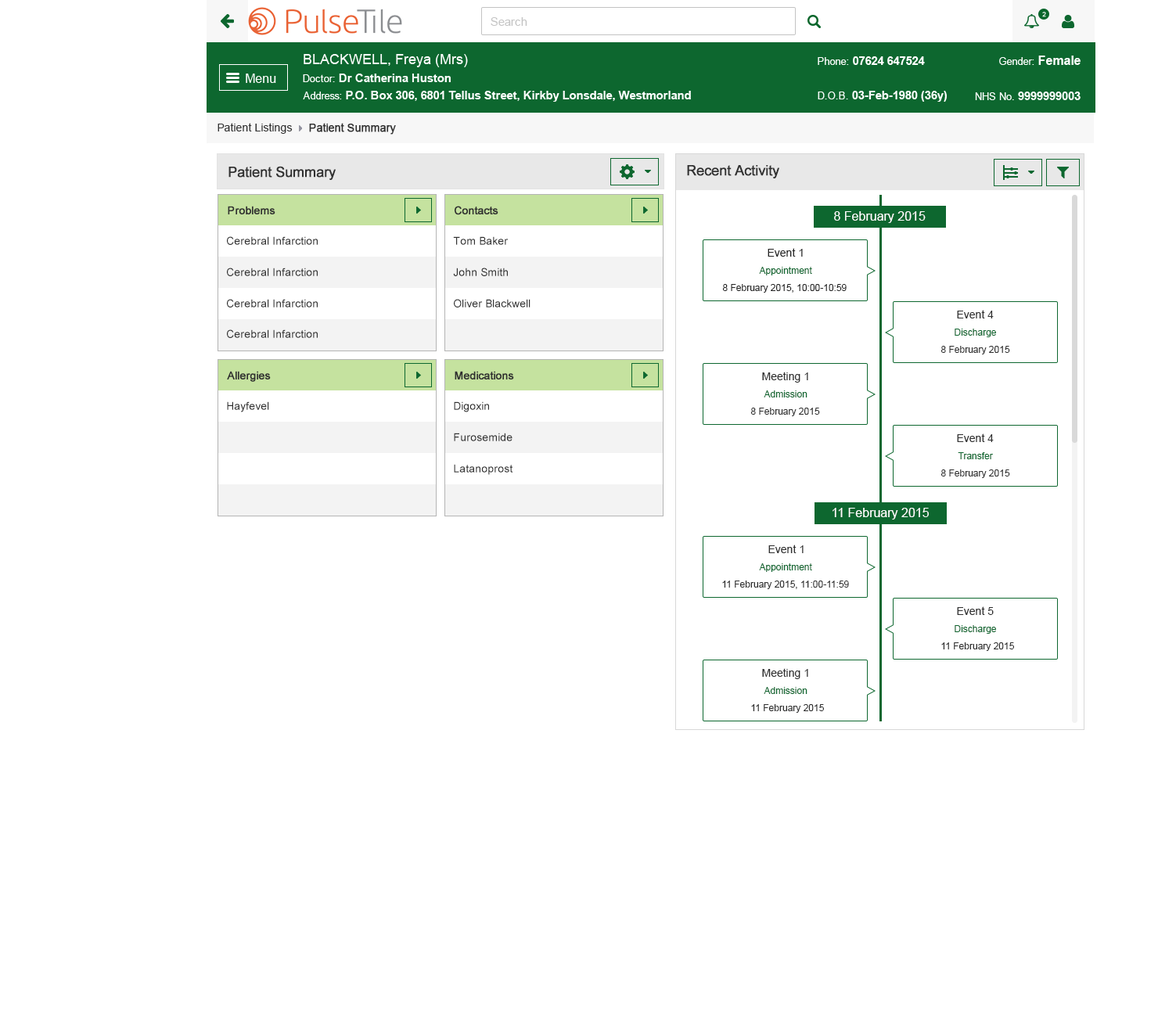
<style>
.page{position:relative;width:1176px;height:1014px;background:#ffffff}
.page>*{position:absolute;margin:0}
.t1{font:11px "ArialMT";color:#313131}
.t2{font:11px "ArialMT";color:#313131;font-weight:bold}
.t3{font:14.1px "ArialMT";color:#303030;font-weight:bold}
.t4{font:11px "ArialMT";color:#303030;font-weight:bold}
.t5{font:12.5px "ArialMT";color:#ffffff}
.t6{font:11px "ArialMT";color:#303030}
.t7{font:11px "ArialMT";color:#242424}
.t8{font:9.4px "ArialMT";color:#0d672f}
.t9{font:9.4px "ArialMT";color:#242424}
.t10{font:9.4px "ArialMT";color:#303030}
</style>
<div class="page">
<p class="t1" style="left:218px;top:123px;width:75px;height:11px">Patient Listings</p>
<p class="t2" style="left:309px;top:123px;width:87px;height:12px">Patient Summary</p>
<p class="t3" style="left:228px;top:166px;width:108px;height:14px">Patient Summary</p>
<p class="t3" style="left:687px;top:165px;width:92px;height:13px">Recent Activity</p>
<p class="t4" style="left:228px;top:206px;width:47px;height:8px">Problems</p>
<p class="t4" style="left:455px;top:206px;width:43px;height:9px">Contacts</p>
<p class="t5" style="left:834px;top:211px;width:92px;height:12px">8 February 2015</p>
<p class="t6" style="left:227px;top:236px;width:91px;height:9px">Cerebral Infarction</p>
<p class="t6" style="left:453px;top:236px;width:56px;height:9px">Tom Baker</p>
<p class="t7" style="left:768px;top:248px;width:35px;height:9px">Event 1</p>
<p class="t6" style="left:227px;top:268px;width:91px;height:8px">Cerebral Infarction</p>
<p class="t6" style="left:453px;top:268px;width:55px;height:8px">John Smith</p>
<p class="t8" style="left:759px;top:267px;width:53px;height:8px">Appointment</p>
<p class="t9" style="left:722px;top:284px;width:125px;height:9px">8 February 2015, 10:00-10:59</p>
<p class="t6" style="left:227px;top:299px;width:91px;height:8px">Cerebral Infarction</p>
<p class="t6" style="left:454px;top:299px;width:76px;height:8px">Oliver Blackwell</p>
<p class="t6" style="left:957px;top:310px;width:37px;height:8px">Event 4</p>
<p class="t6" style="left:227px;top:329px;width:91px;height:9px">Cerebral Infarction</p>
<p class="t8" style="left:955px;top:329px;width:41px;height:8px">Discharge</p>
<p class="t10" style="left:940px;top:346px;width:70px;height:8px">8 February 2015</p>
<p class="t4" style="left:227px;top:371px;width:44px;height:11px">Allergies</p>
<p class="t4" style="left:455px;top:371px;width:59px;height:8px">Medications</p>
<p class="t6" style="left:762px;top:372px;width:46px;height:11px">Meeting 1</p>
<p class="t6" style="left:227px;top:401px;width:42px;height:11px">Hayfevel</p>
<p class="t6" style="left:454px;top:401px;width:35px;height:11px">Digoxin</p>
<p class="t8" style="left:764px;top:390px;width:43px;height:7px">Admission</p>
<p class="t10" style="left:750px;top:408px;width:70px;height:8px">8 February 2015</p>
<p class="t6" style="left:454px;top:433px;width:58px;height:8px">Furosemide</p>
<p class="t6" style="left:957px;top:433px;width:37px;height:9px">Event 4</p>
<p class="t8" style="left:958px;top:452px;width:35px;height:7px">Transfer</p>
<p class="t6" style="left:454px;top:464px;width:59px;height:11px">Latanoprost</p>
<p class="t10" style="left:940px;top:469px;width:70px;height:9px">8 February 2015</p>
<p class="t5" style="left:832px;top:508px;width:97px;height:12px">11 February 2015</p>
<p class="t6" style="left:768px;top:545px;width:36px;height:8px">Event 1</p>
<p class="t8" style="left:759px;top:563px;width:53px;height:9px">Appointment</p>
<p class="t10" style="left:722px;top:581px;width:127px;height:8px">11 February 2015, 11:00-11:59</p>
<p class="t6" style="left:957px;top:606px;width:37px;height:9px">Event 5</p>
<p class="t8" style="left:955px;top:625px;width:41px;height:9px">Discharge</p>
<p class="t10" style="left:941px;top:642px;width:73px;height:9px">11 February 2015</p>
<p class="t6" style="left:762px;top:668px;width:46px;height:11px">Meeting 1</p>
<p class="t8" style="left:764px;top:687px;width:43px;height:7px">Admission</p>
<p class="t10" style="left:751px;top:704px;width:73px;height:9px">11 February 2015</p>
</div>
